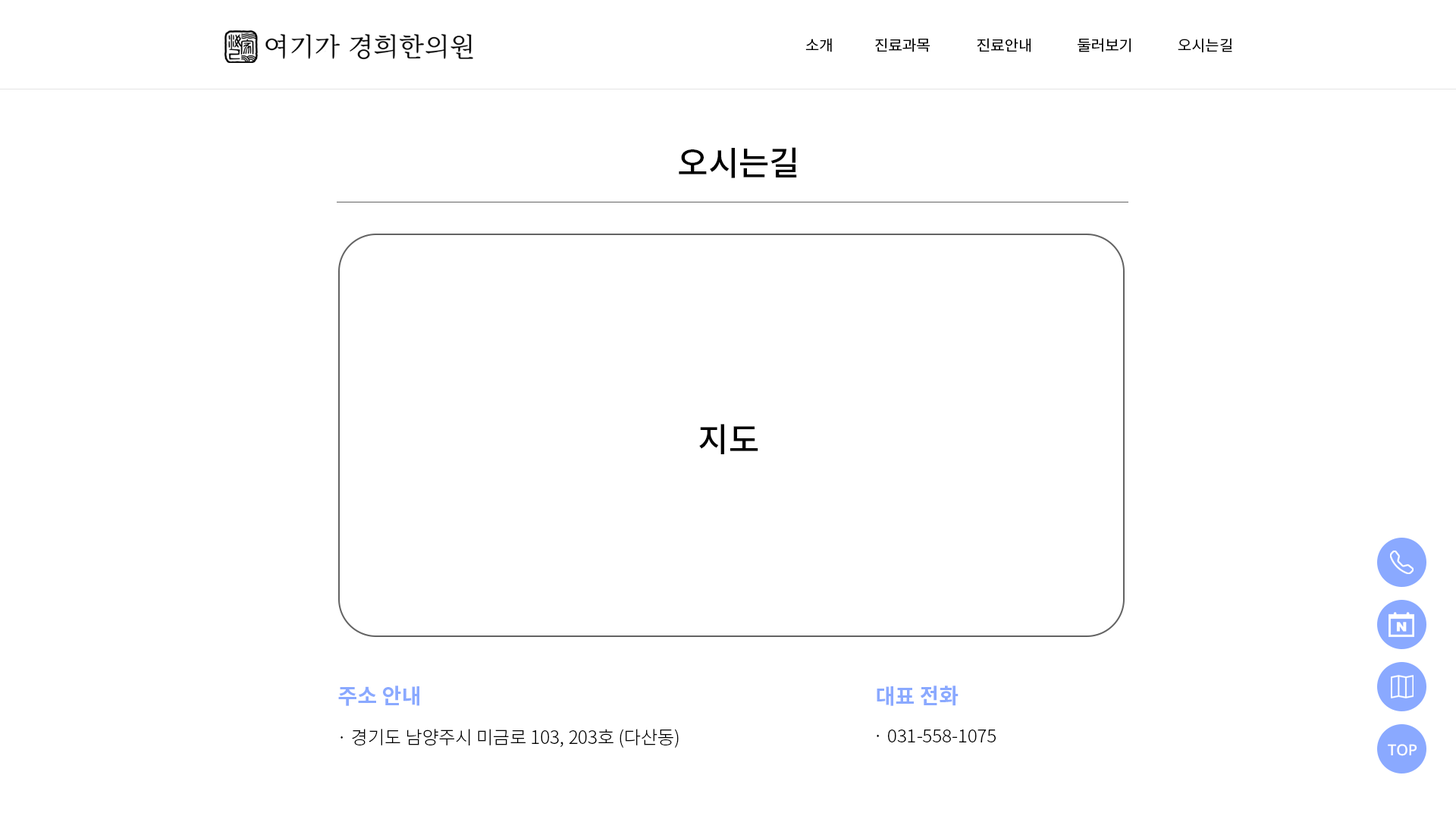
<style>
.page{position:relative;width:1456px;height:819px;background:#ffffff}
.page>*{position:absolute;margin:0}
.t1{font:15.2px "NotoSansKR-Regular";color:#000000}
.t2{font:33.4px "NotoSansKR-Medium";color:#000000}
.t3{font:21.2px "NotoSansKR-Bold";color:#8aa9ff}
.t4{font:18.2px "NotoSansKR-Light";color:#000000}
.t5{font:15.2px "NotoSans-Medium";color:#ffffff}
</style>
<div class="page">
<p class="t1" style="left:805px;top:38px;width:27px;height:14px">소개</p>
<p class="t1" style="left:875px;top:38px;width:55px;height:14px">진료과목</p>
<p class="t1" style="left:977px;top:38px;width:54px;height:14px">진료안내</p>
<p class="t1" style="left:1078px;top:38px;width:53px;height:14px">둘러보기</p>
<p class="t1" style="left:1178px;top:38px;width:54px;height:14px">오시는길</p>
<p class="t2" style="left:679px;top:147px;width:118px;height:31px">오시는길</p>
<p class="t2" style="left:699px;top:424px;width:59px;height:30px">지도</p>
<p class="t3" style="left:338px;top:686px;width:81px;height:20px">주소 안내</p>
<p class="t3" style="left:877px;top:686px;width:82px;height:20px">대표 전화</p>
<p class="t4" style="left:340px;top:729px;width:339px;height:19px">· 경기도 남양주시 미금로 103, 203호 (다산동)</p>
<p class="t4" style="left:877px;top:730px;width:119px;height:12px">· 031-558-1075</p>
<p class="t5" style="left:1388px;top:744px;width:29px;height:12px">TOP</p>
</div>
